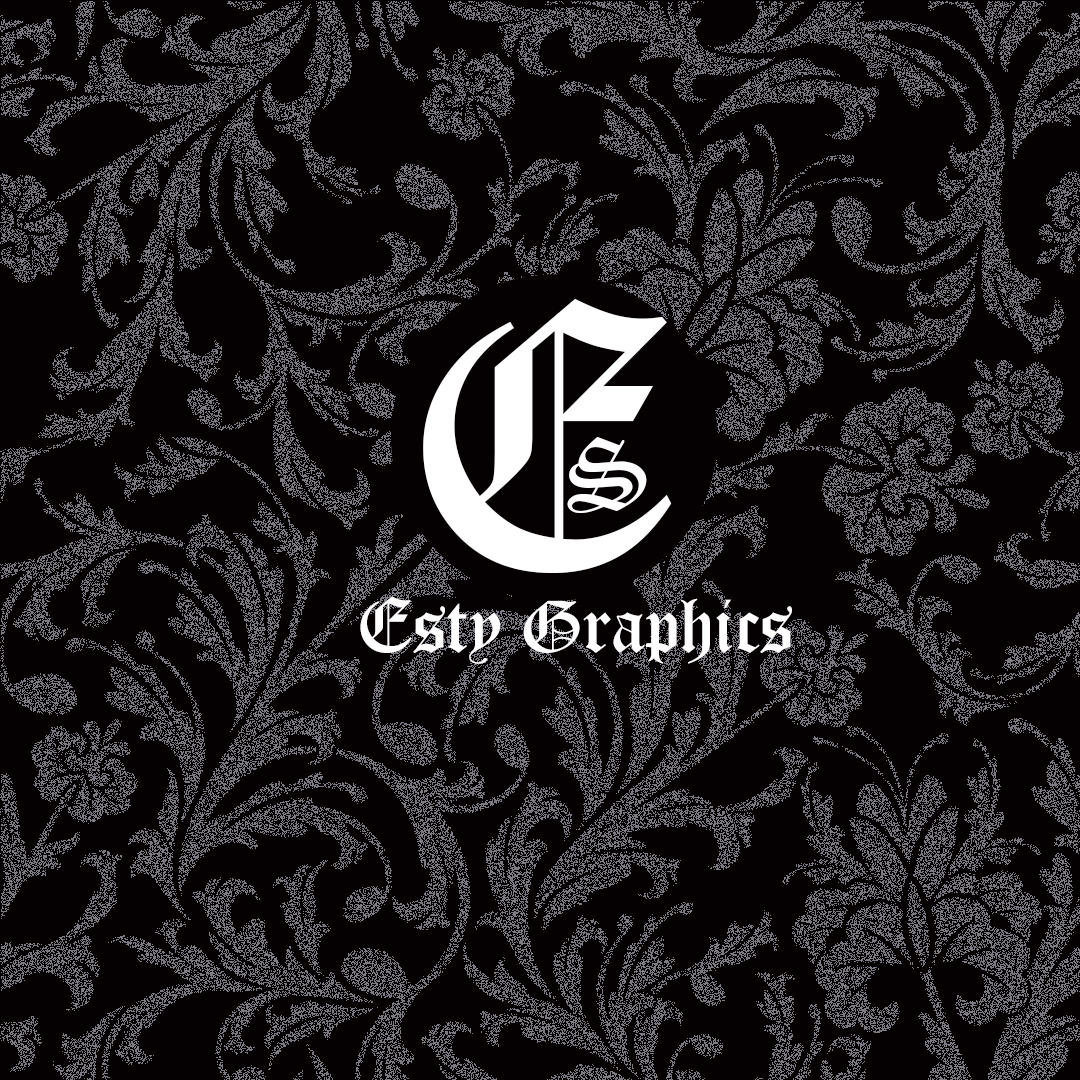
<style>
.page{position:relative;width:1080px;height:1080px;background:#050002}
.page>*{position:absolute;margin:0}
.t1{font:376px "OldEnglishTextMT";color:#ffffff}
.t2{font:100.3px "OldEnglishTextMT";color:#ffffff}
.t3{font:77.6px "OldEnglishTextMT";letter-spacing:-0.01em;color:#ffffff}
</style>
<div class="page">
<p class="t1" style="left:423px;top:299px;width:249px;height:274px">E</p>
<p class="t2" style="left:567px;top:437px;width:80px;height:76px">S</p>
<p class="t3" style="left:360px;top:596px;width:432px;height:68px">Esty Graphics</p>
</div>
